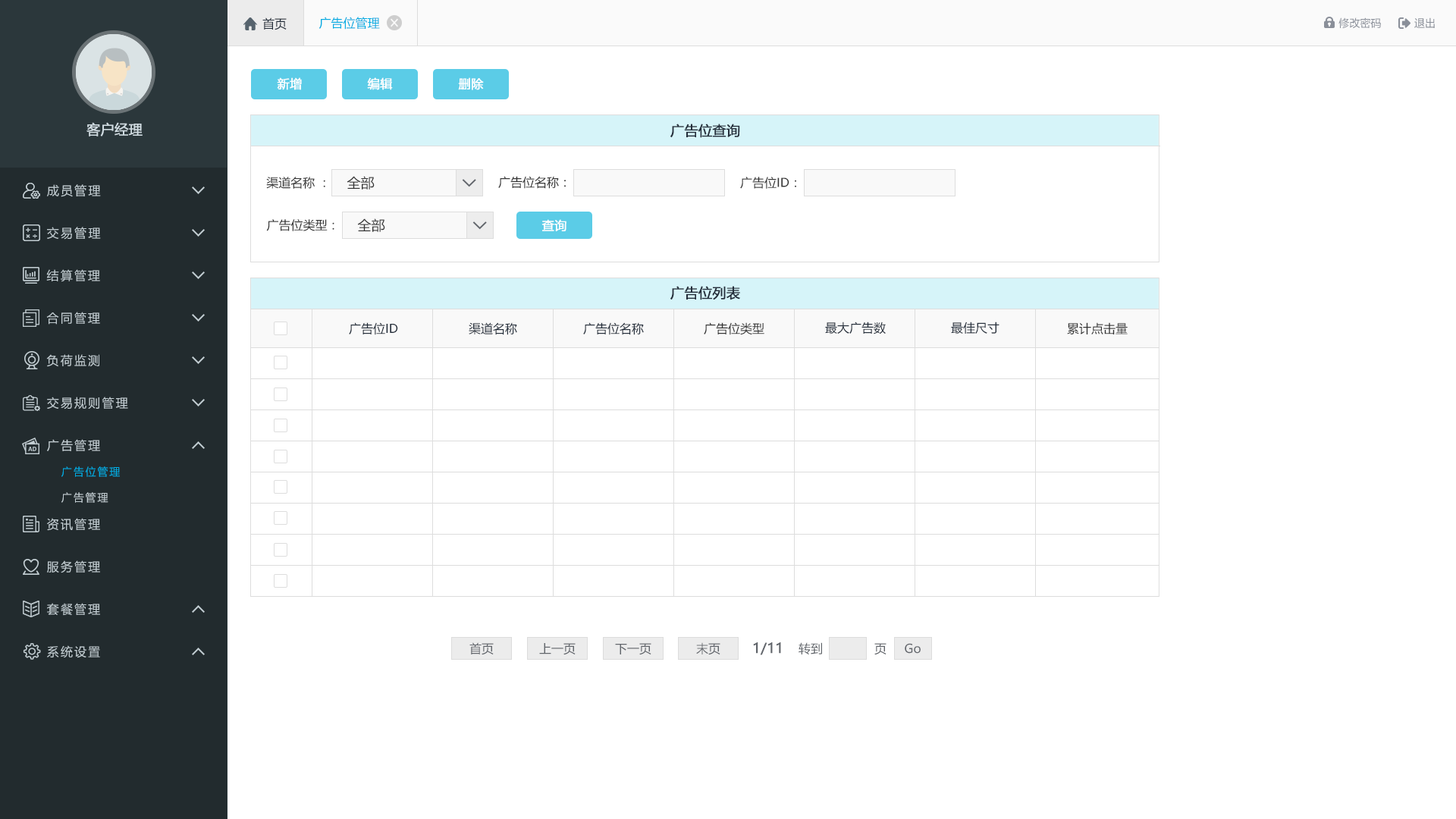
<style>
.page{position:relative;width:1456px;height:819px;background:#ffffff}
.page>*{position:absolute;margin:0}
.t1{font:12.1px "MicrosoftYaHei";color:#242e3b}
.t2{font:12.1px "MicrosoftYaHei";color:#00ace2}
.t3{font:10.6px "MicrosoftYaHei";color:#8a8f99}
.t4{font:12.1px "MicrosoftYaHei";color:#ffffff;font-weight:bold}
.t5{font:13.6px "MicrosoftYaHei";color:#d1dce2;font-weight:bold}
.t6{font:13.6px "MicrosoftYaHei";color:#242e3b;font-weight:bold}
.t7{font:12.1px "MicrosoftYaHei";letter-spacing:0.14em;color:#c2cdd2}
.t8{font:12.1px "MicrosoftYaHei";color:#333333}
.t9{font:13.6px "MicrosoftYaHei";color:#333333}
.t10{font:10.6px "MicrosoftYaHei";letter-spacing:0.14em;color:#00ace2}
.t11{font:10.6px "MicrosoftYaHei";letter-spacing:0.14em;color:#c2cdd2}
.t12{font:12.1px "MicrosoftYaHei";color:#61656b}
.t13{font:13.6px "MicrosoftYaHei";color:#61656b;font-weight:bold}
</style>
<div class="page">
<p class="t1" style="left:262px;top:17px;width:25px;height:13px">首页</p>
<p class="t2" style="left:318px;top:17px;width:62px;height:13px">广告位管理</p>
<p class="t3" style="left:1338px;top:17px;width:43px;height:12px">修改密码</p>
<p class="t3" style="left:1414px;top:17px;width:21px;height:11px">退出</p>
<p class="t4" style="left:277px;top:77px;width:25px;height:13px">新增</p>
<p class="t4" style="left:367px;top:77px;width:26px;height:13px">编辑</p>
<p class="t4" style="left:458px;top:77px;width:26px;height:13px">删除</p>
<p class="t5" style="left:86px;top:122px;width:57px;height:14px">客户经理</p>
<p class="t6" style="left:670px;top:124px;width:70px;height:14px">广告位查询</p>
<p class="t7" style="left:47px;top:184px;width:54px;height:13px">成员管理</p>
<p class="t8" style="left:266px;top:177px;width:59px;height:12px">渠道名称 ：</p>
<p class="t9" style="left:347px;top:176px;width:28px;height:14px">全部</p>
<p class="t8" style="left:498px;top:176px;width:68px;height:13px">广告位名称：</p>
<p class="t8" style="left:740px;top:177px;width:56px;height:12px">广告位ID：</p>
<p class="t8" style="left:266px;top:219px;width:68px;height:12px">广告位类型：</p>
<p class="t9" style="left:357px;top:218px;width:28px;height:14px">全部</p>
<p class="t4" style="left:541px;top:219px;width:25px;height:12px">查询</p>
<p class="t7" style="left:47px;top:227px;width:54px;height:13px">交易管理</p>
<p class="t7" style="left:46px;top:269px;width:54px;height:13px">结算管理</p>
<p class="t6" style="left:670px;top:286px;width:70px;height:14px">广告位列表</p>
<p class="t7" style="left:46px;top:312px;width:54px;height:13px">合同管理</p>
<p class="t1" style="left:349px;top:322px;width:49px;height:13px">广告位ID</p>
<p class="t1" style="left:469px;top:322px;width:48px;height:13px">渠道名称</p>
<p class="t1" style="left:583px;top:322px;width:61px;height:13px">广告位名称</p>
<p class="t8" style="left:704px;top:322px;width:60px;height:13px">广告位类型</p>
<p class="t1" style="left:825px;top:322px;width:61px;height:12px">最大广告数</p>
<p class="t1" style="left:951px;top:322px;width:48px;height:12px">最佳尺寸</p>
<p class="t8" style="left:1067px;top:322px;width:61px;height:12px">累计点击量</p>
<p class="t7" style="left:46px;top:354px;width:53px;height:13px">负荷监测</p>
<p class="t7" style="left:47px;top:397px;width:81px;height:12px">交易规则管理</p>
<p class="t7" style="left:47px;top:439px;width:53px;height:12px">广告管理</p>
<p class="t10" style="left:61px;top:466px;width:59px;height:11px">广告位管理</p>
<p class="t11" style="left:61px;top:492px;width:47px;height:11px">广告管理</p>
<p class="t7" style="left:47px;top:518px;width:53px;height:13px">资讯管理</p>
<p class="t7" style="left:47px;top:560px;width:53px;height:13px">服务管理</p>
<p class="t7" style="left:47px;top:603px;width:53px;height:13px">套餐管理</p>
<p class="t7" style="left:47px;top:645px;width:53px;height:13px">系统设置</p>
<p class="t12" style="left:469px;top:642px;width:25px;height:13px">首页</p>
<p class="t12" style="left:539px;top:643px;width:37px;height:12px">上一页</p>
<p class="t12" style="left:615px;top:643px;width:36px;height:12px">下一页</p>
<p class="t12" style="left:696px;top:642px;width:24px;height:13px">末页</p>
<p class="t13" style="left:753px;top:642px;width:28px;height:13px">1/11</p>
<p class="t12" style="left:799px;top:642px;width:23px;height:12px">转到</p>
<p class="t12" style="left:874px;top:643px;width:12px;height:12px">页</p>
<p class="t12" style="left:905px;top:643px;width:16px;height:11px">Go</p>
</div>
